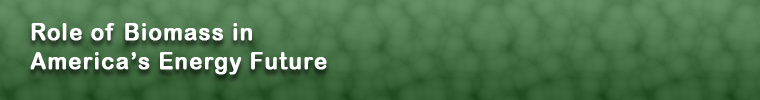
<style>
.page{position:relative;width:760px;height:100px}
.page>*{position:absolute;margin:0}
.t1{font:24px "ArialRoundedMTBold";letter-spacing:0.05em;color:#ffffff;font-weight:bold;scale:0.9 1}
</style>
<div class="page">
<p class="t1" style="left:30px;top:23px;width:297px;height:52px">Role of Biomass in <br>America’s Energy Future</p>
</div>
